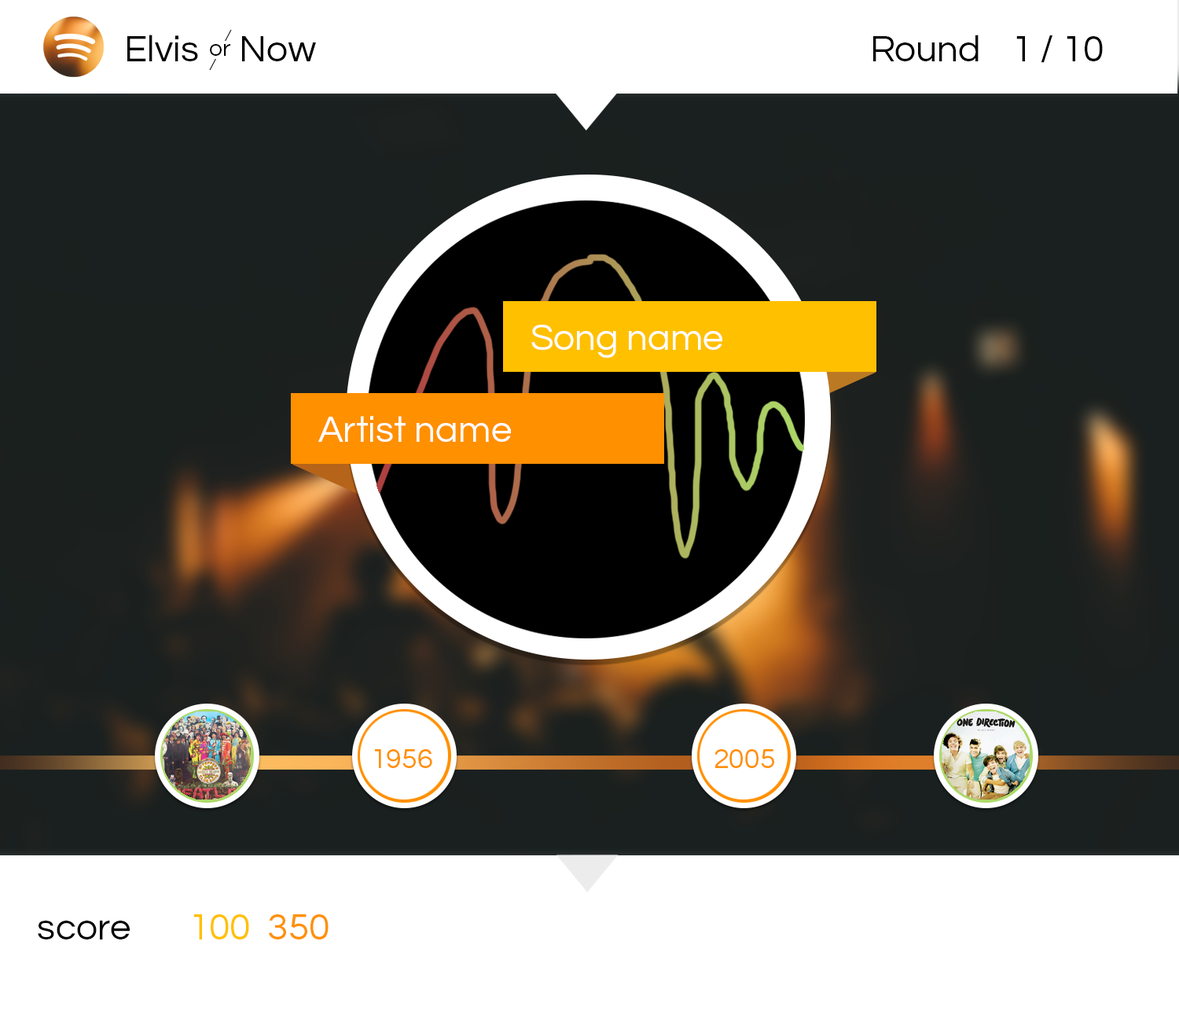
<style>
.page{position:relative;width:1179px;height:1011px;background:#ffffff}
.page>*{position:absolute;margin:0}
.t1{font:37.7px "Questrial-Regular";color:#000000}
.t2{font:23.6px "Questrial-Regular";color:#000000}
.t3{font:37.7px "Questrial-Regular";color:#ffffff}
.t4{font:28.3px "Questrial-Regular";color:#ff9000}
.t5{font:37.7px "Questrial-Regular";color:#ffc000}
.t6{font:37.7px "Questrial-Regular";color:#ff9000}
</style>
<div class="page">
<p class="t1" style="left:127px;top:35px;width:189px;height:26px">Elvis     Now</p>
<p class="t1" style="left:874px;top:35px;width:229px;height:28px">Round  1 / 10</p>
<p class="t2" style="left:210px;top:44px;width:20px;height:12px">or</p>
<p class="t3" style="left:531px;top:325px;width:192px;height:33px">Song name</p>
<p class="t3" style="left:318px;top:416px;width:193px;height:26px">Artist name</p>
<p class="t4" style="left:375px;top:749px;width:57px;height:19px">1956</p>
<p class="t4" style="left:715px;top:749px;width:59px;height:19px">2005</p>
<p class="t5" style="left:193px;top:914px;width:56px;height:26px">100</p>
<p class="t6" style="left:269px;top:914px;width:60px;height:26px">350</p>
<p class="t1" style="left:38px;top:921px;width:92px;height:19px">score</p>
</div>
